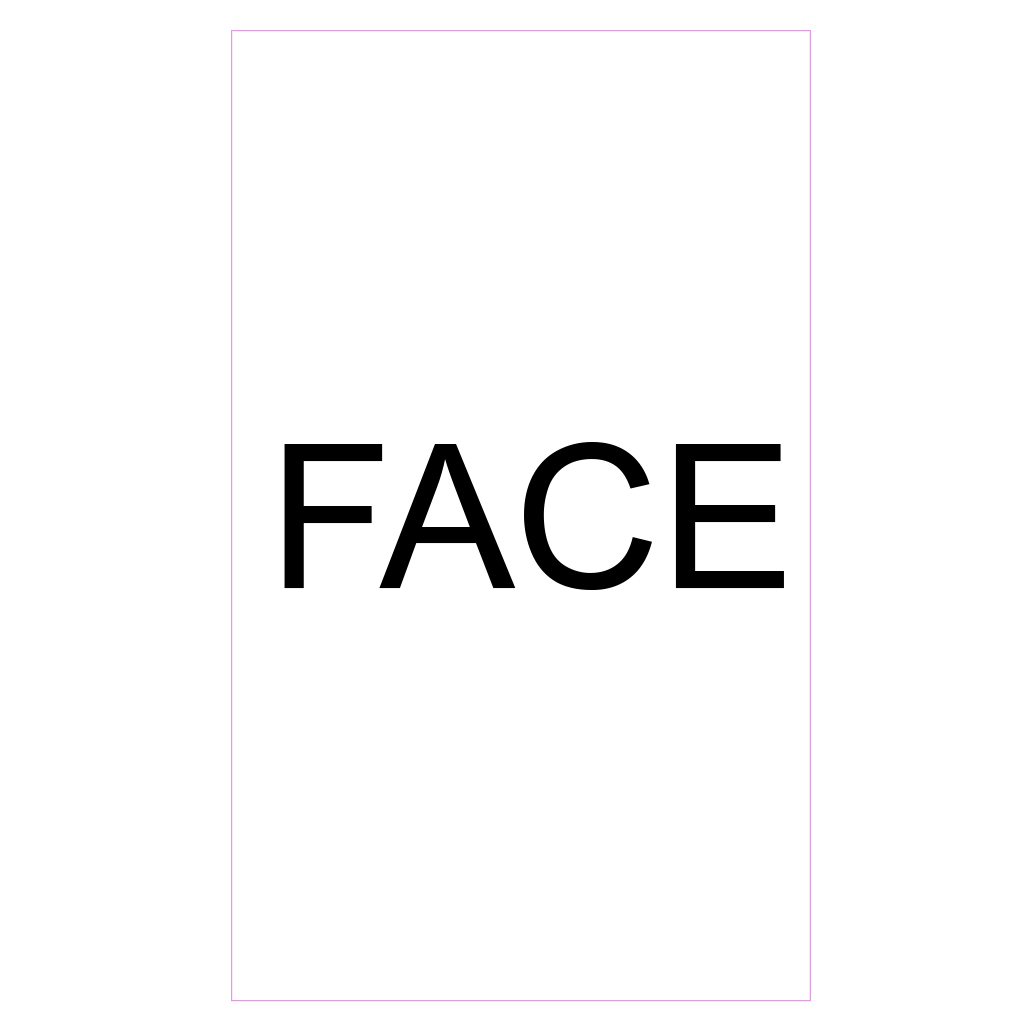
<style>
.page{position:relative;width:1024px;height:1024px;background:#ffffff}
.page>*{position:absolute;margin:0}
.t1{font:201.2px "ArialMT";color:#000000}
</style>
<div class="page">
<p class="t1" style="left:284px;top:442px;width:500px;height:148px">FACE</p>
</div>
